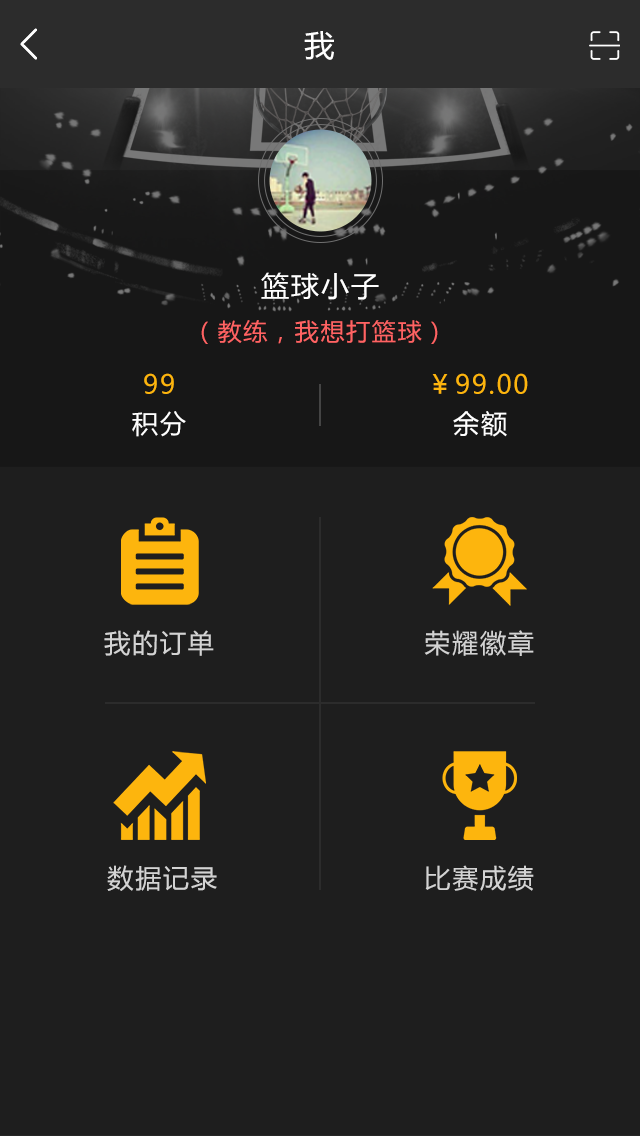
<style>
.page{position:relative;width:640px;height:1136px;background:#1e1e1e}
.page>*{position:absolute;margin:0}
.t1{font:30px "MicrosoftYaHei";letter-spacing:0.07em;color:#ffffff}
.t2{font:28px "MicrosoftYaHei";letter-spacing:0.07em;color:#ffffff}
.t3{font:24px "MicrosoftYaHei";letter-spacing:0.07em;color:#fe6363}
.t4{font:26px "MicrosoftYaHei";letter-spacing:0.07em;color:#fdb50d}
.t5{font:26px "MicrosoftYaHei";letter-spacing:0.07em;color:#ffffff}
.t6{font:26px "MicrosoftYaHei";letter-spacing:0.07em;color:#d3d3d3}
</style>
<div class="page">
<p class="t1" style="left:304px;top:31px;width:30px;height:29px">我</p>
<p class="t2" style="left:261px;top:272px;width:118px;height:28px">篮球小子</p>
<p class="t3" style="left:201px;top:320px;width:237px;height:24px">（教练，我想打篮球）</p>
<p class="t4" style="left:144px;top:373px;width:30px;height:21px">99</p>
<p class="t4" style="left:432px;top:373px;width:96px;height:21px">￥99.00</p>
<p class="t5" style="left:132px;top:411px;width:54px;height:26px">积分</p>
<p class="t5" style="left:453px;top:411px;width:54px;height:26px">余额</p>
<p class="t6" style="left:104px;top:630px;width:110px;height:26px">我的订单</p>
<p class="t6" style="left:424px;top:630px;width:110px;height:26px">荣耀徽章</p>
<p class="t6" style="left:107px;top:865px;width:110px;height:26px">数据记录</p>
<p class="t6" style="left:425px;top:865px;width:109px;height:26px">比赛成绩</p>
</div>
